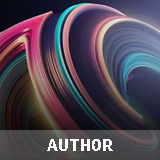
<style>
.page{position:relative;width:160px;height:160px}
.page>*{position:absolute;margin:0}
.t1{font:18px "SourceCodePro-Bold";color:#ffffff}
</style>
<div class="page">
<p class="t1" style="left:47px;top:139px;width:66px;height:12px">AUTHOR</p>
</div>
